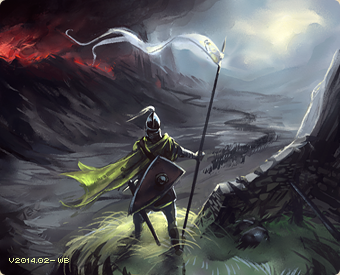
<style>
.page{position:relative;width:340px;height:275px}
.page>*{position:absolute;margin:0}
.t1{font:17px "Retrovirus";color:#e4eca0}
</style>
<div class="page">
<p class="t1" style="left:9px;top:256px;width:60px;height:7px">v2014.02- wb</p>
</div>
